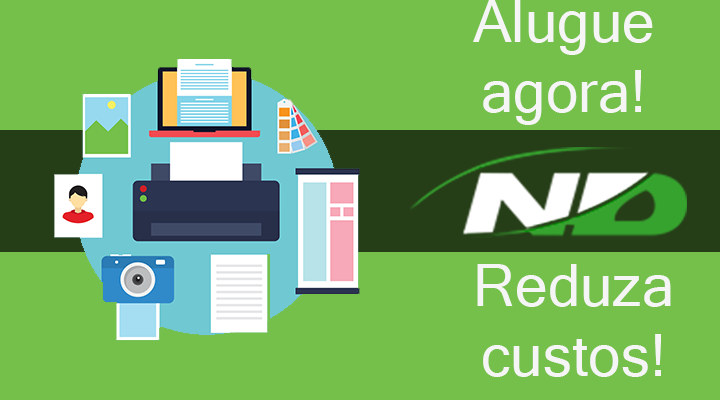
<style>
.page{position:relative;width:720px;height:400px;background:#75c04a}
.page>*{position:absolute;margin:0}
.t1{font:58.3px "MicrosoftSansSerif";color:#f5f5f5}
</style>
<div class="page">
<p class="t1" style="left:473px;top:0px;width:180px;height:125px;text-align:center">Alugue <br>agora!</p>
<p class="t1" style="left:477px;top:264px;width:194px;height:113px;text-align:center">Reduza<br>custos!</p>
</div>
